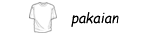
<style>
.page{position:relative;width:155px;height:36px;background:#ffffff}
.page>*{position:absolute;margin:0}
.t1{font:14px "ComicSansMS";color:#000000;font-style:italic}
</style>
<div class="page">
<p class="t1" style="left:71px;top:12px;width:48px;height:15px">pakaian</p>
</div>
